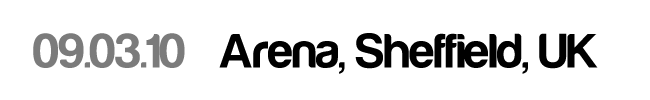
<style>
.page{position:relative;width:650px;height:100px;background:#ffffff}
.page>*{position:absolute;margin:0}
.t1{font:50px "Harabara-Bold";color:#000000}
.t2{font:50px "Harabara-Bold";color:#7b7b7b}
</style>
<div class="page">
<p class="t1" style="left:33px;top:33px;width:565px;height:41px"><span class="t2">09.03.10</span>   Arena, Sheffield, UK</p>
</div>
